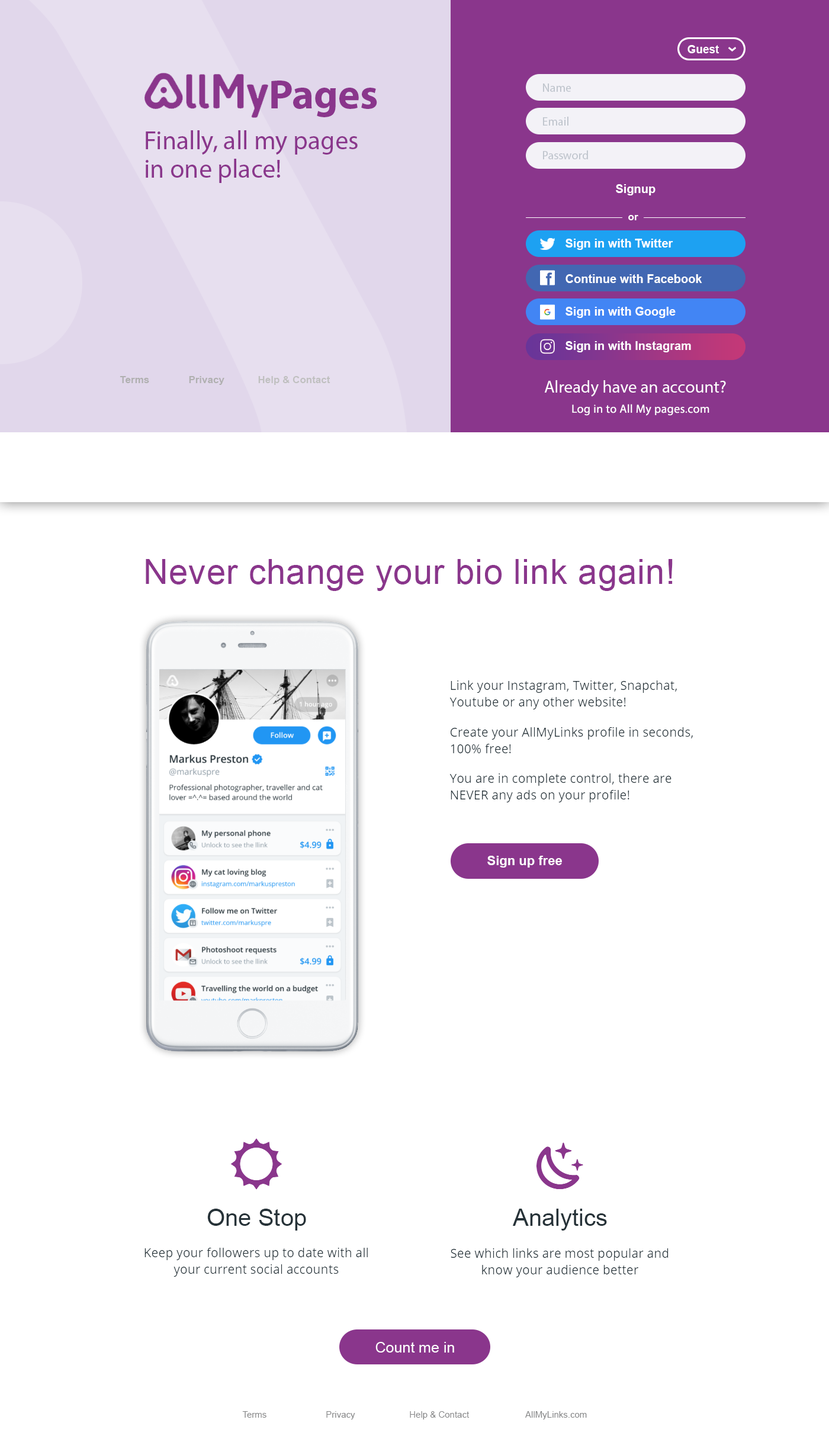
<style>
.page{position:relative;width:829px;height:1439px;background:#ffffff}
.page>*{position:absolute;margin:0}
.t1{font:11.2px "Arial-BoldMT";color:#ffffff}
.t2{font:41.4px "MyriadPro-Bold";color:#8a368c}
.t3{font:11.8px "MyriadPro-Regular";color:#bec4cc}
.t4{font:26px/28.4px "MyriadPro-Regular";color:#8a368c}
.t5{font:11.8px "Arial-BoldMT";color:#ffffff}
.t6{font:10.1px "Arial-BoldMT";color:#ffffff}
.t7{font:17.3px "Arial-BoldMT";letter-spacing:0.08em;color:#4267b2}
.t8{font:10.1px "Arial-BoldMT";color:#b0b0b0}
.t9{font:17.2px "MyriadPro-Regular";color:#ffffff}
.t10{font:11.8px "MyriadPro-Regular";letter-spacing:0.02em;color:#ffffff}
.t11{font:34.3px "ArialMT";letter-spacing:0.02em;color:#8a368c}
.t12{font:13px "Arial-BoldMT";color:#ffffff}
.t13{font:23.7px "ArialMT";color:#263238}
.t14{font:14.8px "ArialMT";color:#ffffff}
.t15{font:8.9px "ArialMT";color:#858687}
</style>
<div class="page">
<p class="t1" style="left:687px;top:45px;width:32px;height:8px">Guest</p>
<p class="t2" style="left:271px;top:81px;width:106px;height:36px">Pages</p>
<p class="t3" style="left:543px;top:83px;width:28px;height:9px">Name</p>
<p class="t3" style="left:543px;top:117px;width:25px;height:9px">Email</p>
<p class="t4" style="left:146px;top:130px;width:212px;height:53px">Finally, all my pages<br>in one place!</p>
<p class="t3" style="left:543px;top:150px;width:45px;height:9px">Password</p>
<p class="t5" style="left:616px;top:184px;width:39px;height:11px">Signup</p>
<p class="t6" style="left:628px;top:215px;width:10px;height:5px">or</p>
<p class="t5" style="left:565px;top:239px;width:108px;height:11px">Sign in with Twitter</p>
<p class="t7" style="left:546px;top:272px;width:6px;height:13px">f</p>
<p class="t5" style="left:565px;top:274px;width:137px;height:9px">Continue with Facebook</p>
<p class="t5" style="left:565px;top:307px;width:111px;height:11px">Sign in with Google</p>
<p class="t5" style="left:565px;top:341px;width:126px;height:11px">Sign in with lnstagram</p>
<p class="t8" style="left:120px;top:376px;width:210px;height:9px">Terms              Privacy            Help &amp; Contact</p>
<p class="t9" style="left:544px;top:380px;width:182px;height:17px">Already have an account?</p>
<p class="t10" style="left:572px;top:404px;width:137px;height:12px">Log in to All My pages.com</p>
<p class="t11" style="left:146px;top:559px;width:527px;height:32px">Never change your bio link again!</p>
<p class="t12" style="left:487px;top:855px;width:75px;height:12px">Sign up free</p>
<p class="t13" style="left:207px;top:1208px;width:99px;height:22px">One Stop</p>
<p class="t13" style="left:513px;top:1208px;width:94px;height:22px">Analytics</p>
<p class="t14" style="left:375px;top:1342px;width:79px;height:10px">Count me in</p>
<p class="t15" style="left:242px;top:1411px;width:345px;height:8px">Terms                        Privacy                      Help &amp; Contact                       AllMyLinks.com</p>
</div>
